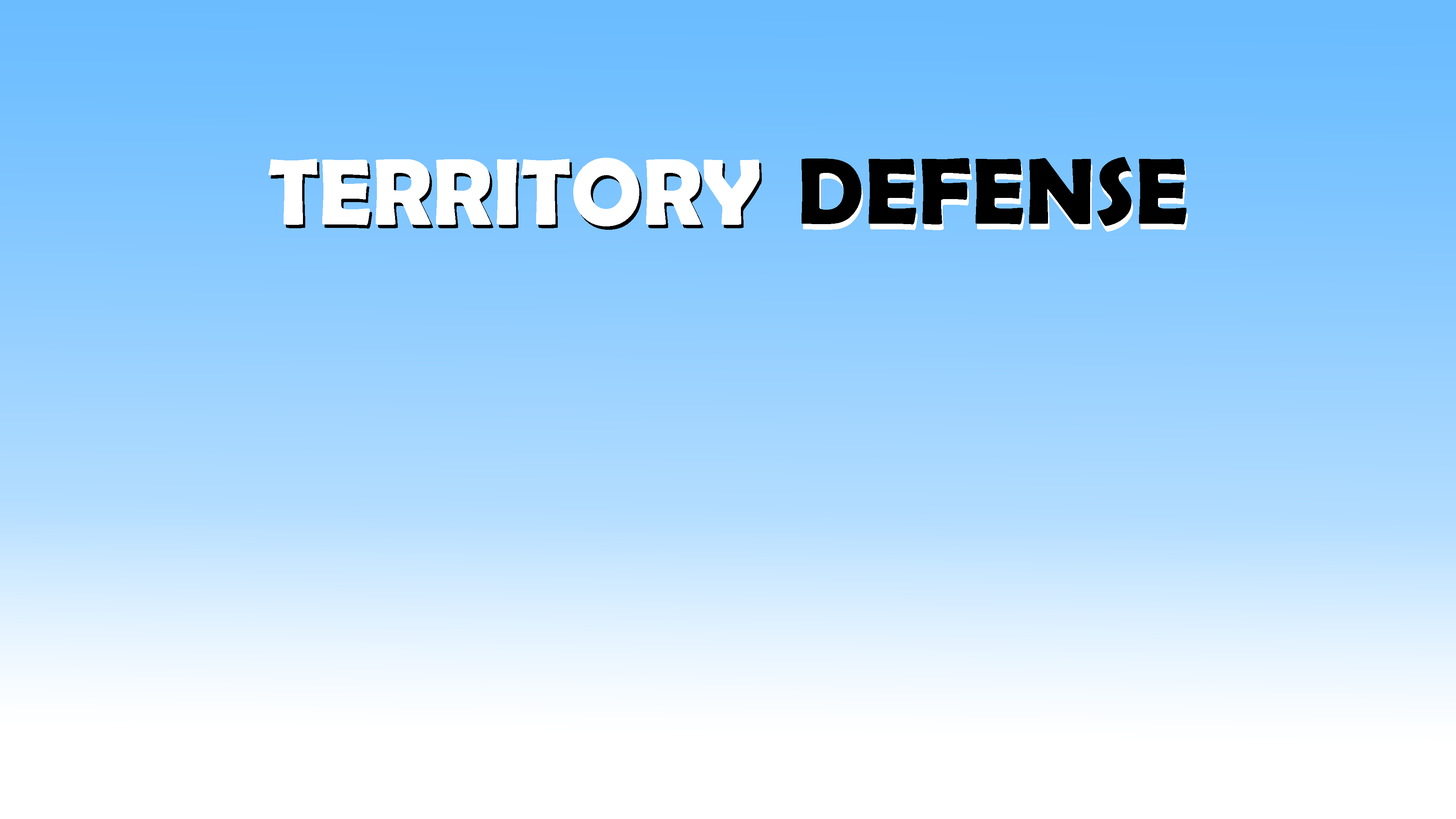
<style>
.page{position:relative;width:1456px;height:819px}
.page>*{position:absolute;margin:0}
.t1{font:94.8px "BerlinSansFBDemi-Bold";color:#ffffff}
.t2{font:94.8px "BerlinSansFBDemi-Bold";color:#000000}
</style>
<div class="page">
<p class="t1" style="left:268px;top:158px;width:491px;height:68px">TERRITORY</p>
<p class="t1" style="left:271px;top:161px;width:491px;height:69px">TERRITORY</p>
<p class="t2" style="left:802px;top:157px;width:384px;height:69px">DEFENSE</p>
<p class="t2" style="left:803px;top:163px;width:385px;height:69px">DEFENSE</p>
</div>
